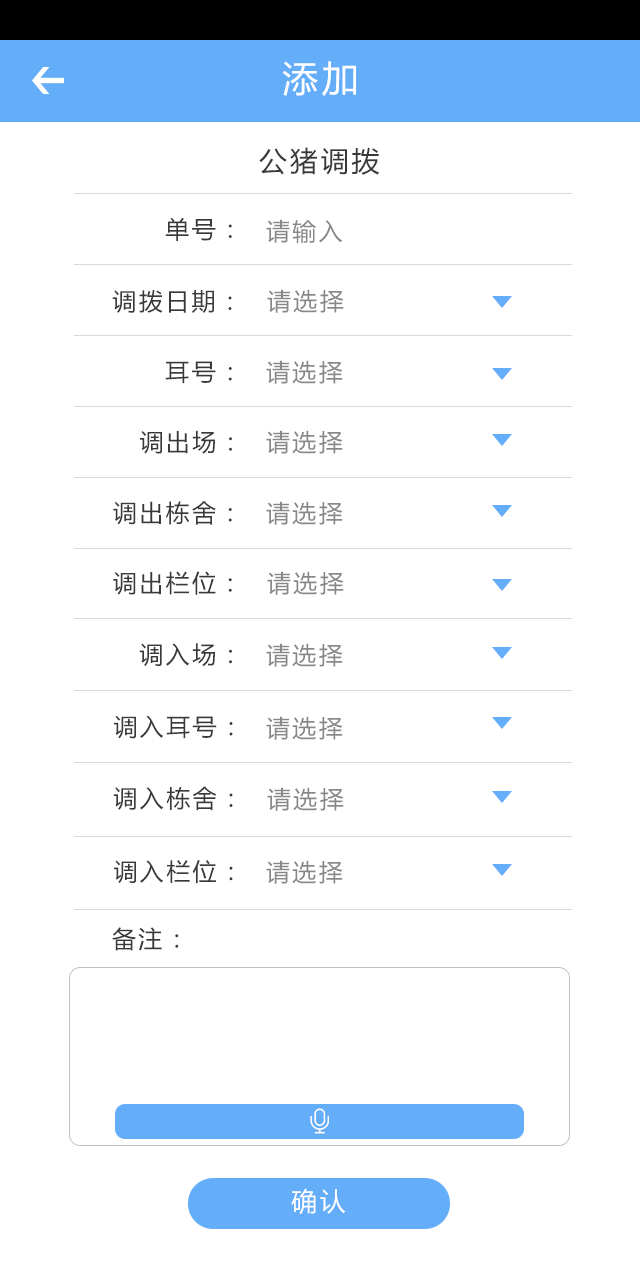
<style>
.page{position:relative;width:640px;height:1281px;background:#ffffff}
.page>*{position:absolute;margin:0}
.t1{font:36px "MicrosoftYaHei";letter-spacing:0.1em;color:#ffffff}
.t2{font:28px "MicrosoftYaHei";letter-spacing:0.1em;color:#3a3939}
.t3{font:24px "MicrosoftYaHei";letter-spacing:0.1em;color:#3a3939}
.t4{font:24px "MicrosoftYaHei";letter-spacing:0.1em;color:#898888}
.t5{font:26px "MicrosoftYaHei";letter-spacing:0.1em;color:#ffffff}
</style>
<div class="page">
<p class="t1" style="left:282px;top:61px;width:74px;height:35px">添加</p>
<p class="t2" style="left:259px;top:147px;width:121px;height:28px">公猪调拨</p>
<p class="t3" style="left:165px;top:217px;width:67px;height:24px">单号：</p>
<p class="t4" style="left:266px;top:219px;width:77px;height:24px">请输入</p>
<p class="t3" style="left:112px;top:290px;width:120px;height:23px">调拨日期：</p>
<p class="t4" style="left:267px;top:289px;width:77px;height:24px">请选择</p>
<p class="t3" style="left:165px;top:361px;width:67px;height:23px">耳号：</p>
<p class="t4" style="left:266px;top:360px;width:77px;height:24px">请选择</p>
<p class="t3" style="left:140px;top:430px;width:92px;height:24px">调出场：</p>
<p class="t4" style="left:266px;top:430px;width:77px;height:24px">请选择</p>
<p class="t3" style="left:113px;top:501px;width:119px;height:24px">调出栋舍：</p>
<p class="t4" style="left:266px;top:501px;width:77px;height:24px">请选择</p>
<p class="t3" style="left:113px;top:571px;width:119px;height:24px">调出栏位：</p>
<p class="t4" style="left:267px;top:571px;width:77px;height:24px">请选择</p>
<p class="t3" style="left:139px;top:643px;width:93px;height:24px">调入场：</p>
<p class="t4" style="left:266px;top:643px;width:77px;height:24px">请选择</p>
<p class="t3" style="left:114px;top:715px;width:119px;height:24px">调入耳号：</p>
<p class="t4" style="left:266px;top:716px;width:77px;height:24px">请选择</p>
<p class="t3" style="left:113px;top:786px;width:120px;height:25px">调入栋舍：</p>
<p class="t4" style="left:267px;top:787px;width:77px;height:24px">请选择</p>
<p class="t3" style="left:114px;top:860px;width:119px;height:24px">调入栏位：</p>
<p class="t4" style="left:266px;top:860px;width:77px;height:24px">请选择</p>
<p class="t3" style="left:112px;top:927px;width:67px;height:24px">备注：</p>
<p class="t5" style="left:291px;top:1188px;width:55px;height:27px">确认</p>
</div>
